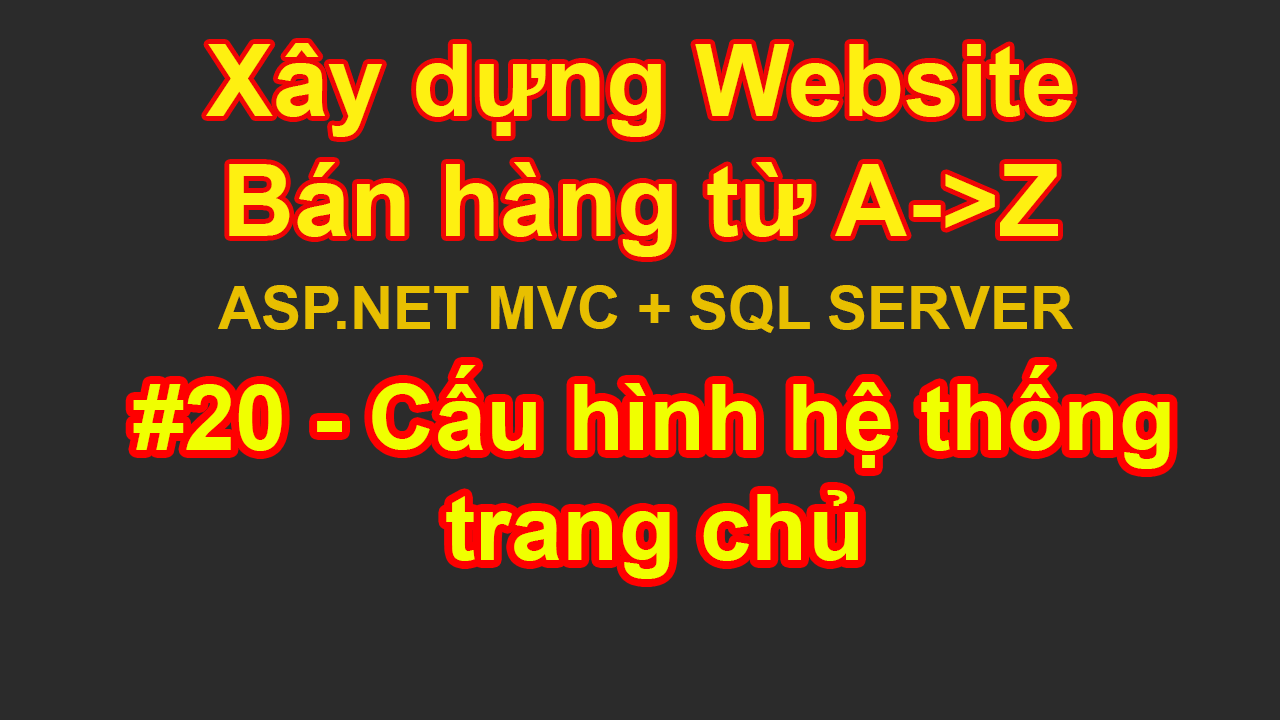
<style>
.page{position:relative;width:1280px;height:720px;background:#2b2b2b}
.page>*{position:absolute;margin:0}
.t1{font:100px "Arial-BoldMT";color:#fef011}
.t2{font:60px "Arial-BoldMT";color:#e8bf00}
.t3{font:92px "Arial-BoldMT";color:#f0ff00}
</style>
<div class="page">
<p class="t1" style="left:206px;top:43px;width:867px;height:214px;text-align:center">Xây dựng Website<br>Bán hàng từ A-&gt;Z</p>
<p class="t2" style="left:218px;top:285px;width:855px;height:48px">ASP.NET MVC + SQL SERVER</p>
<p class="t3" style="left:133px;top:365px;width:1037px;height:214px;text-align:center">#20 - Cấu hình hệ thống<br>trang chủ</p>
</div>
